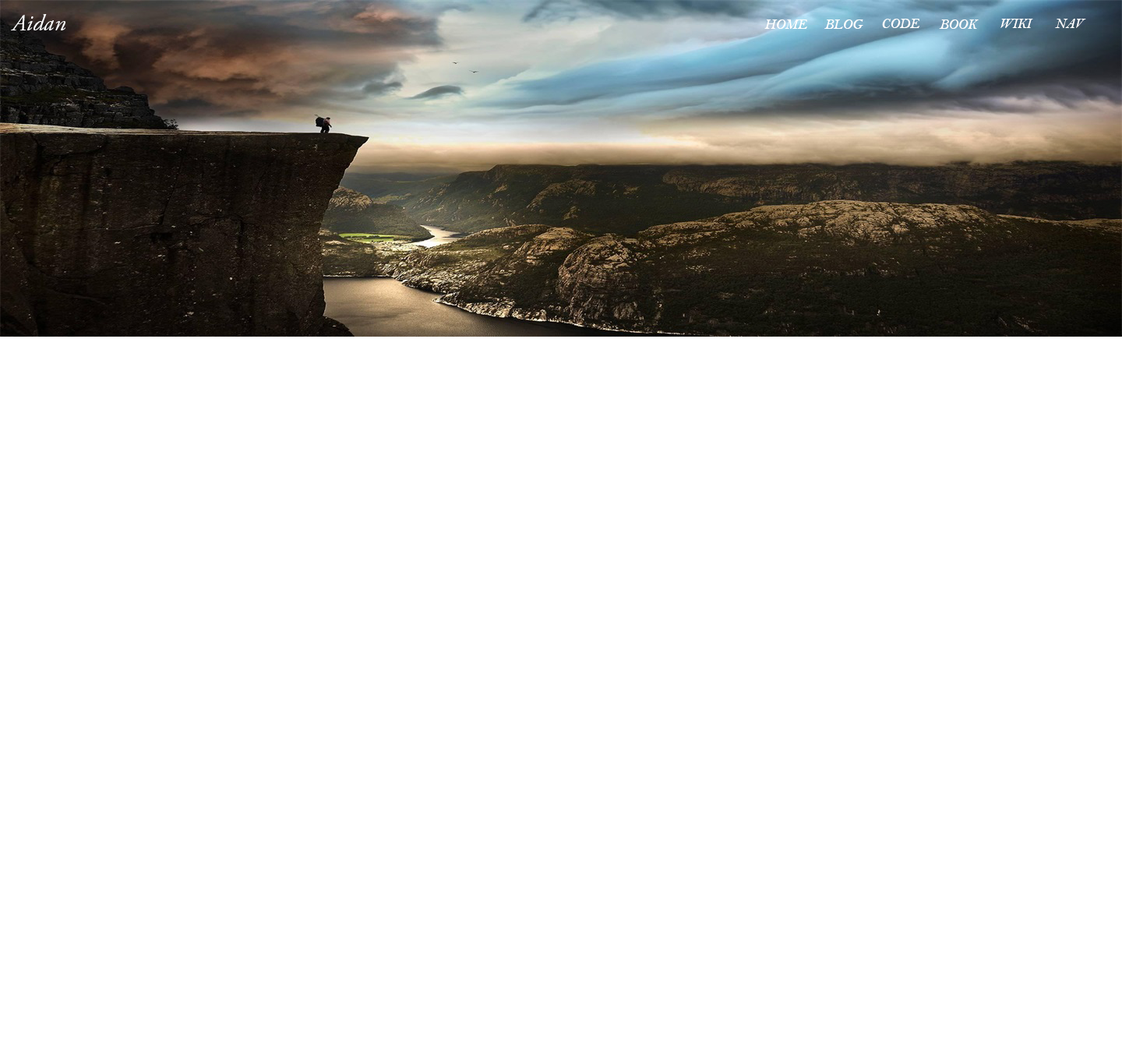
<style>
.page{position:relative;width:1122px;height:1063px;background:#ffffff}
.page>*{position:absolute;margin:0}
.t1{font:23.4px "AGaramondPro-Italic";color:#ffffff}
.t2{font:14px "BellMTItalic";color:#ffffff}
</style>
<div class="page">
<p class="t1" style="left:11px;top:14px;width:54px;height:16px">Aidan</p>
<p class="t2" style="left:764px;top:19px;width:43px;height:10px">HOME</p>
<p class="t2" style="left:824px;top:19px;width:39px;height:10px">BLOG</p>
<p class="t2" style="left:882px;top:19px;width:37px;height:9px">CODE</p>
<p class="t2" style="left:939px;top:19px;width:40px;height:10px">BOOK</p>
<p class="t2" style="left:1000px;top:19px;width:33px;height:9px">WIKI</p>
<p class="t2" style="left:1055px;top:19px;width:31px;height:9px">NAV</p>
</div>
